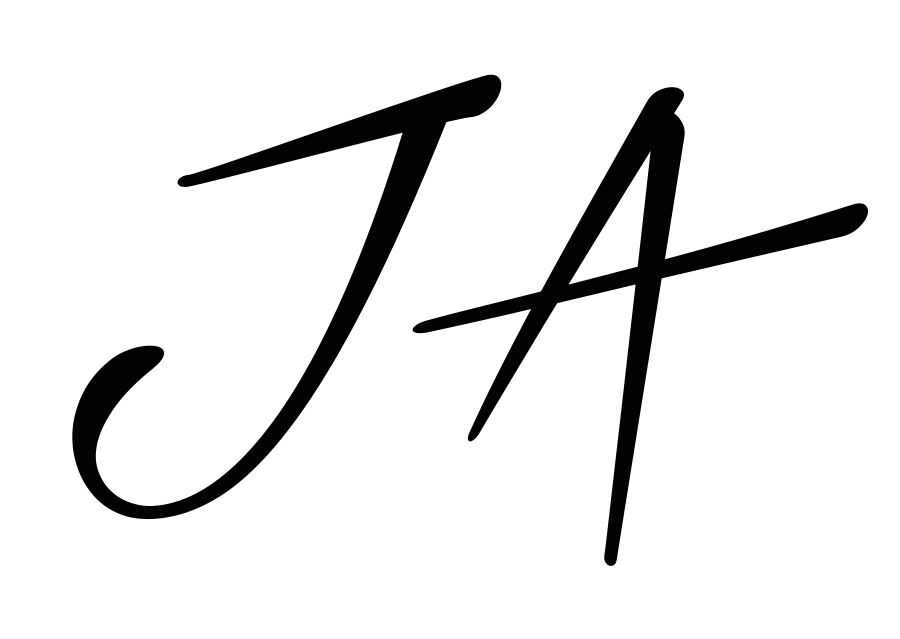
<style>
.page{position:relative;width:900px;height:639px;background:#ffffff}
.page>*{position:absolute;margin:0}
.t1{font:405.5px "Xtreem2PersonalUse";letter-spacing:0.02em;color:#020202;scale:1.16 1}
</style>
<div class="page">
<p class="t1" style="left:72px;top:74px;width:797px;height:492px">JA</p>
</div>
